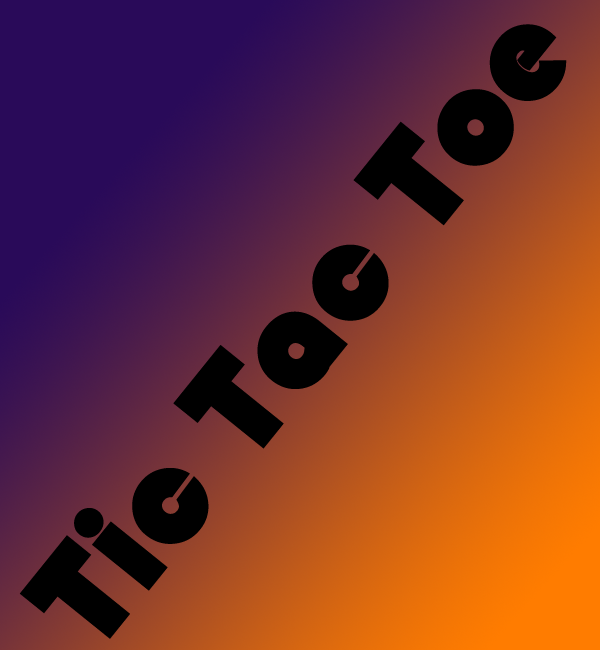
<style>
.page{position:relative;width:600px;height:650px}
.page>*{position:absolute;margin:0}
.t1{font:142px "Bauhaus93";color:#000000;font-weight:bold}
</style>
<div class="page">
<p class="t1" style="left:19px;top:24px;width:548px;height:615px;rotate:-51deg">Tic Tac Toe</p>
</div>
